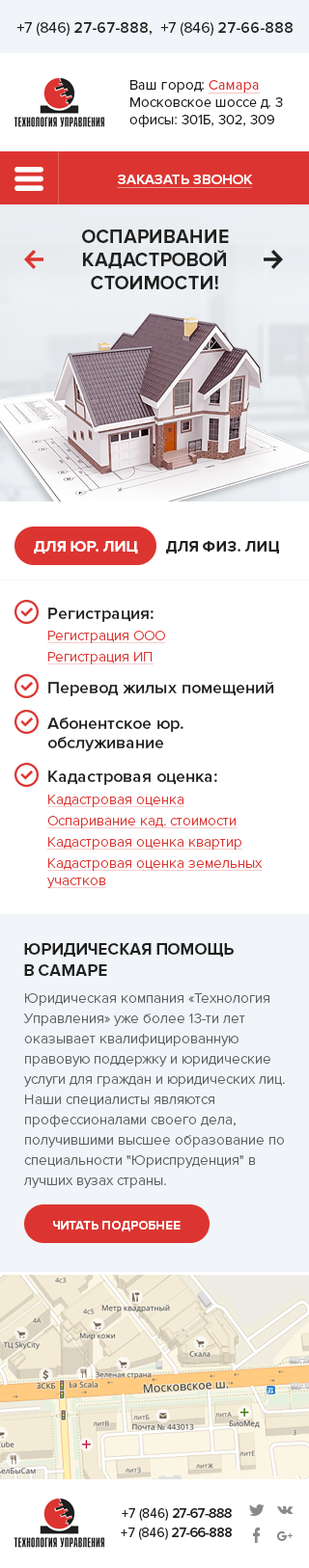
<style>
.page{position:relative;width:309px;height:1568px;background:#ffffff}
.page>*{position:absolute;margin:0}
.t1{font:15.4px "ProximaNova-Semibold";color:#20201f}
.t2{font:15.4px "ProximaNova-Regular";color:#20201f}
.t3{font:14.5px "ProximaNova-Regular";color:#20201f}
.t4{font:14.5px "ProximaNova-Regular";color:#dc3531;text-decoration:underline}
.t5{font:14.5px "ProximaNova-Semibold";color:#ffffff;text-decoration:underline}
.t6{font:19.3px "ProximaNova-Bold";color:#20201f}
.t7{font:15.4px "ProximaNova-Bold";color:#ffffff;text-transform:uppercase}
.t8{font:15.4px "ProximaNova-Bold";color:#20201f;text-transform:uppercase}
.t9{font:17.4px "ProximaNova-Semibold";color:#20201f}
.t10{font:14.5px/21.2px "ProximaNova-Light";color:#dc3531;text-decoration:underline}
.t11{font:17.4px/19.3px "ProximaNova-Semibold";color:#20201f}
.t12{font:14.5px "ProximaNova-Light";color:#dc3531;text-decoration:underline}
.t13{font:16.4px/21.2px "ProximaNova-Bold";color:#20201f;text-transform:uppercase}
.t14{font:14.5px/20.3px "ProximaNova-Light";color:#606162}
.t15{font:12.5px "ProximaNova-Bold";color:#ffffff;text-transform:uppercase}
.t16{font:13.5px/19.3px "ProximaNova-Semibold";color:#20201f}
.t17{font:13.5px/19.3px "ProximaNova-Regular";color:#20201f}
</style>
<div class="page">
<p class="t1" style="left:16px;top:22px;width:276px;height:15px"><span class="t2">+7 (846) </span>27-67-888,  <span class="t2">+7 (846) </span>27-66-888</p>
<p class="t3" style="left:129px;top:80px;width:154px;height:47px">Ваш город: <span class="t4">Cамара<br></span>Московское шоссе д. 3<br>офисы: 301Б, 302, 309</p>
<p class="t5" style="left:117px;top:175px;width:136px;height:13px">ЗАКАЗАТЬ ЗВОНОК</p>
<p class="t6" style="left:82px;top:230px;width:147px;height:59px;text-align:center">ОСПАРИВАНИЕ<br>КАДАСТРОВОЙ<br>СТОИМОСТИ!</p>
<p class="t7" style="left:34px;top:541px;width:104px;height:13px">Для юр. лиц</p>
<p class="t8" style="left:166px;top:541px;width:113px;height:13px">Для физ. лиц</p>
<p class="t9" style="left:48px;top:608px;width:105px;height:14px">Регистрация:</p>
<p class="t10" style="left:47px;top:631px;width:118px;height:33px">Регистрация ООО<br>Регистрация ИП</p>
<p class="t9" style="left:48px;top:682px;width:226px;height:14px">Перевод жилых помещений</p>
<p class="t11" style="left:47px;top:717px;width:136px;height:34px">Абонентское юр.<br>обслуживание</p>
<p class="t9" style="left:48px;top:770px;width:169px;height:15px">Кадастровая оценка:</p>
<p class="t10" style="left:47px;top:795px;width:215px;height:93px">Кадастровая оценка<br>Оспаривание кад. стоимости<br>Кадастровая оценка квартир<br>Кадастр<span class="t12">овая оценка земельных<br>участков</span></p>
<p class="t13" style="left:24px;top:943px;width:209px;height:33px">Юридическая помощь<br>в Самаре</p>
<p class="t14" style="left:24px;top:993px;width:260px;height:195px">Юридическая компания «Технология Управления» уже более 13-ти лет оказывает квалифицированную правовую поддержку и юридические услуги для граждан и юридических лиц. Наши специалисты являются профессионалами своего дела, получившими высшее образование по специальности "Юриспруденция" в лучших вузах страны.</p>
<p class="t15" style="left:53px;top:1221px;width:127px;height:10px">читать подробнее</p>
<p class="t16" style="left:121px;top:1508px;width:110px;height:32px;text-align:center"><span class="t17">+7 (846) </span>27-67-888<br><span class="t17">+7 (846) </span>27-66-888</p>
</div>
